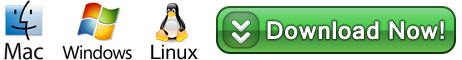
<style>
.page{position:relative;width:462px;height:60px;background:#ffffff}
.page>*{position:absolute;margin:0}
.t1{font:24px "Kartika-Bold";color:#ffffff}
.t2{font:20px "HelveticaNeueLTW1G-Roman";color:#000000}
</style>
<div class="page">
<p class="t1" style="left:267px;top:21px;width:177px;height:19px">Download Now!</p>
<p class="t2" style="left:151px;top:44px;width:47px;height:16px">Linux</p>
</div>
